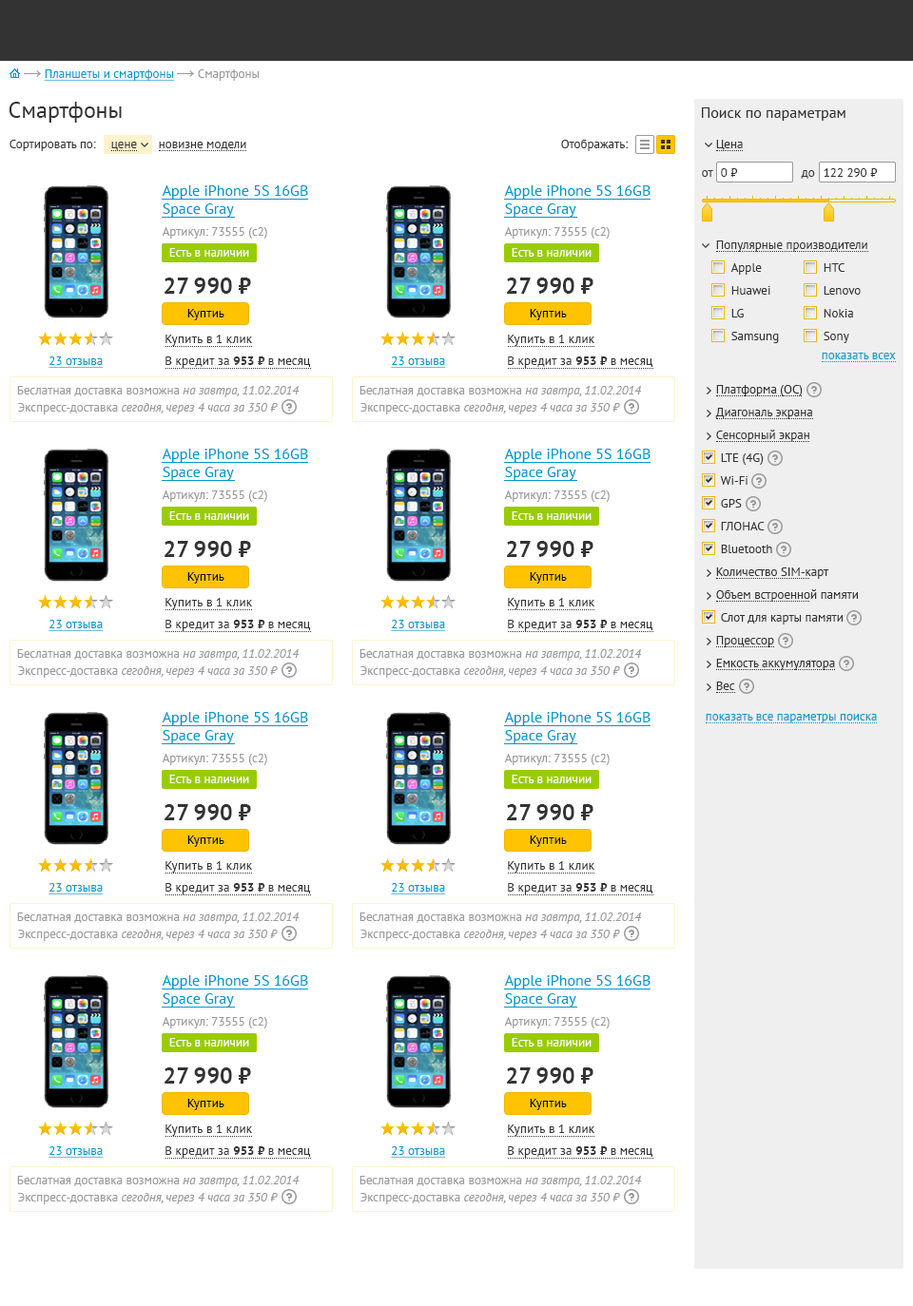
<style>
.page{position:relative;width:913px;height:1306px;background:#ffffff}
.page>*{position:absolute;margin:0}
.t1{font:12.4px "PTSans-Regular";color:#0099cc;text-decoration:underline}
.t2{font:12.4px "PTSans-Regular";color:#999999}
.t3{font:22.8px "PTSans-Regular";color:#333333}
.t4{font:15.2px "PTSans-Regular";color:#333333}
.t5{font:12.4px "PTSans-Regular";color:#333333}
.t6{font:15.2px/18.1px "PTSans-Regular";color:#0099cc}
.t7{font:12.4px "PTSans-Regular";color:#ffffff}
.t8{font:22.8px "PTSans-Bold";color:#333333}
.t9{font:12.4px "PTSans-Regular";color:#000000}
.t10{font:12.4px "PTSans-Regular";color:#0099cc}
.t11{font:12.4px "PTSans-Bold";color:#333333}
.t12{font:12.4px "PTSans-Italic";color:#999999}
</style>
<div class="page">
<p class="t1" style="left:44px;top:69px;width:131px;height:12px">Планшеты и смартфоны</p>
<p class="t2" style="left:198px;top:69px;width:62px;height:12px">Смартфоны</p>
<p class="t3" style="left:9px;top:102px;width:113px;height:21px">Смартфоны</p>
<p class="t4" style="left:702px;top:107px;width:143px;height:14px">Поиск по параметрам</p>
<p class="t5" style="left:10px;top:140px;width:86px;height:11px">Сортировать по:</p>
<p class="t5" style="left:111px;top:142px;width:26px;height:8px">цене</p>
<p class="t5" style="left:159px;top:142px;width:87px;height:8px">новизне модели</p>
<p class="t5" style="left:561px;top:140px;width:67px;height:11px">Отображать:</p>
<p class="t5" style="left:716px;top:140px;width:27px;height:10px">Цена</p>
<p class="t5" style="left:702px;top:170px;width:11px;height:7px">от</p>
<p class="t5" style="left:721px;top:168px;width:17px;height:9px">0 ⃏</p>
<p class="t5" style="left:801px;top:170px;width:14px;height:9px">до</p>
<p class="t5" style="left:823px;top:168px;width:55px;height:9px">122 290 ⃏</p>
<p class="t6" style="left:162px;top:185px;width:146px;height:32px">Apple iPhone 5S 16GB<br>Space Gray</p>
<p class="t6" style="left:504px;top:185px;width:146px;height:32px">Apple iPhone 5S 16GB<br>Space Gray</p>
<p class="t2" style="left:162px;top:227px;width:105px;height:12px">Артикул: 73555 (с2)</p>
<p class="t2" style="left:504px;top:227px;width:105px;height:12px">Артикул: 73555 (с2)</p>
<p class="t5" style="left:716px;top:241px;width:151px;height:11px">Популярные производители</p>
<p class="t7" style="left:169px;top:248px;width:80px;height:9px">Есть в наличии</p>
<p class="t7" style="left:512px;top:248px;width:79px;height:9px">Есть в наличии</p>
<p class="t5" style="left:730px;top:263px;width:32px;height:12px">Apple</p>
<p class="t5" style="left:823px;top:263px;width:21px;height:9px">HTC</p>
<p class="t8" style="left:164px;top:278px;width:87px;height:16px">27 990 ⃏</p>
<p class="t8" style="left:507px;top:278px;width:86px;height:16px">27 990 ⃏</p>
<p class="t5" style="left:731px;top:286px;width:39px;height:9px">Huawei</p>
<p class="t5" style="left:823px;top:286px;width:37px;height:9px">Lenovo</p>
<p class="t9" style="left:187px;top:309px;width:37px;height:11px">Куптиь</p>
<p class="t9" style="left:530px;top:309px;width:37px;height:11px">Куптиь</p>
<p class="t5" style="left:731px;top:309px;width:13px;height:9px">LG</p>
<p class="t5" style="left:823px;top:309px;width:30px;height:9px">Nokia</p>
<p class="t5" style="left:165px;top:335px;width:87px;height:11px">Купить в 1 клик</p>
<p class="t5" style="left:508px;top:335px;width:86px;height:11px">Купить в 1 клик</p>
<p class="t5" style="left:731px;top:332px;width:48px;height:11px">Samsung</p>
<p class="t5" style="left:823px;top:332px;width:26px;height:11px">Sony</p>
<p class="t10" style="left:821px;top:353px;width:75px;height:6px">показать всех</p>
<p class="t1" style="left:48px;top:357px;width:56px;height:11px">23 отзыва</p>
<p class="t5" style="left:165px;top:357px;width:145px;height:11px">В кредит за <span class="t11">953 ⃏ </span>в месяц</p>
<p class="t1" style="left:391px;top:357px;width:55px;height:11px">23 отзыва</p>
<p class="t5" style="left:508px;top:357px;width:144px;height:11px">В кредит за <span class="t11">953 ⃏ </span>в месяц</p>
<p class="t2" style="left:17px;top:386px;width:283px;height:11px">Беслатная доставка возможна <span class="t12">на завтра, 11.02.2014</span></p>
<p class="t2" style="left:359px;top:386px;width:283px;height:11px">Беслатная доставка возможна <span class="t12">на завтра, 11.02.2014</span></p>
<p class="t5" style="left:716px;top:385px;width:86px;height:11px">Платформа (ОС)</p>
<p class="t12" style="left:18px;top:403px;width:260px;height:12px"><span class="t2">Экспресс-доставка </span>сегодня, через 4 часа за 350 ⃏</p>
<p class="t12" style="left:360px;top:403px;width:260px;height:12px"><span class="t2">Экспресс-доставка </span>сегодня, через 4 часа за 350 ⃏</p>
<p class="t5" style="left:715px;top:408px;width:97px;height:11px">Диагональ экрана</p>
<p class="t5" style="left:716px;top:430px;width:93px;height:12px">Сенсорный экран</p>
<p class="t6" style="left:162px;top:449px;width:146px;height:31px">Apple iPhone 5S 16GB<br>Space Gray</p>
<p class="t6" style="left:504px;top:449px;width:146px;height:31px">Apple iPhone 5S 16GB<br>Space Gray</p>
<p class="t5" style="left:721px;top:454px;width:42px;height:11px">LTE (4G)</p>
<p class="t5" style="left:720px;top:476px;width:27px;height:9px">Wi-Fi</p>
<p class="t2" style="left:162px;top:491px;width:105px;height:11px">Артикул: 73555 (с2)</p>
<p class="t2" style="left:504px;top:491px;width:105px;height:11px">Артикул: 73555 (с2)</p>
<p class="t5" style="left:721px;top:499px;width:21px;height:9px">GPS</p>
<p class="t7" style="left:169px;top:512px;width:80px;height:8px">Есть в наличии</p>
<p class="t7" style="left:512px;top:512px;width:79px;height:8px">Есть в наличии</p>
<p class="t5" style="left:721px;top:522px;width:43px;height:9px">ГЛОНАС</p>
<p class="t8" style="left:164px;top:541px;width:87px;height:16px">27 990 ⃏</p>
<p class="t8" style="left:507px;top:541px;width:86px;height:16px">27 990 ⃏</p>
<p class="t5" style="left:721px;top:545px;width:51px;height:8px">Bluetooth</p>
<p class="t5" style="left:716px;top:568px;width:113px;height:11px">Количество SIM-карт</p>
<p class="t9" style="left:187px;top:572px;width:37px;height:12px">Куптиь</p>
<p class="t9" style="left:530px;top:572px;width:37px;height:12px">Куптиь</p>
<p class="t5" style="left:716px;top:589px;width:142px;height:13px">Объем встроенной памяти</p>
<p class="t5" style="left:165px;top:598px;width:87px;height:11px">Купить в 1 клик</p>
<p class="t5" style="left:508px;top:598px;width:86px;height:11px">Купить в 1 клик</p>
<p class="t5" style="left:721px;top:613px;width:121px;height:12px">Слот для карты памяти</p>
<p class="t1" style="left:48px;top:620px;width:56px;height:11px">23 отзыва</p>
<p class="t5" style="left:165px;top:620px;width:145px;height:11px">В кредит за <span class="t11">953 ⃏ </span>в месяц</p>
<p class="t1" style="left:391px;top:620px;width:55px;height:11px">23 отзыва</p>
<p class="t5" style="left:508px;top:620px;width:144px;height:11px">В кредит за <span class="t11">953 ⃏ </span>в месяц</p>
<p class="t5" style="left:716px;top:636px;width:58px;height:11px">Процессор</p>
<p class="t2" style="left:17px;top:649px;width:283px;height:12px">Беслатная доставка возможна <span class="t12">на завтра, 11.02.2014</span></p>
<p class="t2" style="left:359px;top:649px;width:283px;height:12px">Беслатная доставка возможна <span class="t12">на завтра, 11.02.2014</span></p>
<p class="t5" style="left:716px;top:659px;width:119px;height:11px">Емкость аккумулятора</p>
<p class="t12" style="left:18px;top:667px;width:260px;height:11px"><span class="t2">Экспресс-доставка </span>сегодня, через 4 часа за 350 ⃏</p>
<p class="t12" style="left:360px;top:667px;width:260px;height:11px"><span class="t2">Экспресс-доставка </span>сегодня, через 4 часа за 350 ⃏</p>
<p class="t5" style="left:716px;top:682px;width:19px;height:8px">Вес</p>
<p class="t6" style="left:162px;top:712px;width:146px;height:32px">Apple iPhone 5S 16GB<br>Space Gray</p>
<p class="t6" style="left:504px;top:712px;width:146px;height:32px">Apple iPhone 5S 16GB<br>Space Gray</p>
<p class="t10" style="left:705px;top:714px;width:172px;height:10px">показать все параметры поиска</p>
<p class="t2" style="left:162px;top:754px;width:105px;height:11px">Артикул: 73555 (с2)</p>
<p class="t2" style="left:504px;top:754px;width:105px;height:11px">Артикул: 73555 (с2)</p>
<p class="t7" style="left:169px;top:775px;width:80px;height:8px">Есть в наличии</p>
<p class="t7" style="left:512px;top:775px;width:79px;height:8px">Есть в наличии</p>
<p class="t8" style="left:164px;top:804px;width:87px;height:17px">27 990 ⃏</p>
<p class="t8" style="left:507px;top:804px;width:86px;height:17px">27 990 ⃏</p>
<p class="t9" style="left:187px;top:836px;width:37px;height:11px">Куптиь</p>
<p class="t9" style="left:530px;top:836px;width:37px;height:11px">Куптиь</p>
<p class="t5" style="left:165px;top:861px;width:87px;height:12px">Купить в 1 клик</p>
<p class="t5" style="left:508px;top:861px;width:86px;height:12px">Купить в 1 клик</p>
<p class="t1" style="left:48px;top:883px;width:56px;height:12px">23 отзыва</p>
<p class="t5" style="left:165px;top:883px;width:145px;height:12px">В кредит за <span class="t11">953 ⃏ </span>в месяц</p>
<p class="t1" style="left:391px;top:883px;width:55px;height:12px">23 отзыва</p>
<p class="t5" style="left:508px;top:883px;width:144px;height:12px">В кредит за <span class="t11">953 ⃏ </span>в месяц</p>
<p class="t2" style="left:17px;top:913px;width:283px;height:11px">Беслатная доставка возможна <span class="t12">на завтра, 11.02.2014</span></p>
<p class="t2" style="left:359px;top:913px;width:283px;height:11px">Беслатная доставка возможна <span class="t12">на завтра, 11.02.2014</span></p>
<p class="t12" style="left:18px;top:930px;width:260px;height:11px"><span class="t2">Экспресс-доставка </span>сегодня, через 4 часа за 350 ⃏</p>
<p class="t12" style="left:360px;top:930px;width:260px;height:11px"><span class="t2">Экспресс-доставка </span>сегодня, через 4 часа за 350 ⃏</p>
<p class="t6" style="left:162px;top:976px;width:146px;height:31px">Apple iPhone 5S 16GB<br>Space Gray</p>
<p class="t6" style="left:504px;top:976px;width:146px;height:31px">Apple iPhone 5S 16GB<br>Space Gray</p>
<p class="t2" style="left:162px;top:1017px;width:105px;height:12px">Артикул: 73555 (с2)</p>
<p class="t2" style="left:504px;top:1017px;width:105px;height:12px">Артикул: 73555 (с2)</p>
<p class="t7" style="left:169px;top:1038px;width:80px;height:9px">Есть в наличии</p>
<p class="t7" style="left:512px;top:1038px;width:79px;height:9px">Есть в наличии</p>
<p class="t8" style="left:164px;top:1068px;width:87px;height:16px">27 990 ⃏</p>
<p class="t8" style="left:507px;top:1068px;width:86px;height:16px">27 990 ⃏</p>
<p class="t9" style="left:187px;top:1099px;width:37px;height:12px">Куптиь</p>
<p class="t9" style="left:530px;top:1099px;width:37px;height:12px">Куптиь</p>
<p class="t5" style="left:165px;top:1125px;width:87px;height:11px">Купить в 1 клик</p>
<p class="t5" style="left:508px;top:1125px;width:86px;height:11px">Купить в 1 клик</p>
<p class="t1" style="left:48px;top:1147px;width:56px;height:11px">23 отзыва</p>
<p class="t5" style="left:165px;top:1147px;width:145px;height:11px">В кредит за <span class="t11">953 ⃏ </span>в месяц</p>
<p class="t1" style="left:391px;top:1147px;width:55px;height:11px">23 отзыва</p>
<p class="t5" style="left:508px;top:1147px;width:144px;height:11px">В кредит за <span class="t11">953 ⃏ </span>в месяц</p>
<p class="t2" style="left:17px;top:1176px;width:283px;height:12px">Беслатная доставка возможна <span class="t12">на завтра, 11.02.2014</span></p>
<p class="t2" style="left:359px;top:1176px;width:283px;height:12px">Беслатная доставка возможна <span class="t12">на завтра, 11.02.2014</span></p>
<p class="t12" style="left:18px;top:1193px;width:260px;height:12px"><span class="t2">Экспресс-доставка </span>сегодня, через 4 часа за 350 ⃏</p>
<p class="t12" style="left:360px;top:1193px;width:260px;height:12px"><span class="t2">Экспресс-доставка </span>сегодня, через 4 часа за 350 ⃏</p>
</div>
